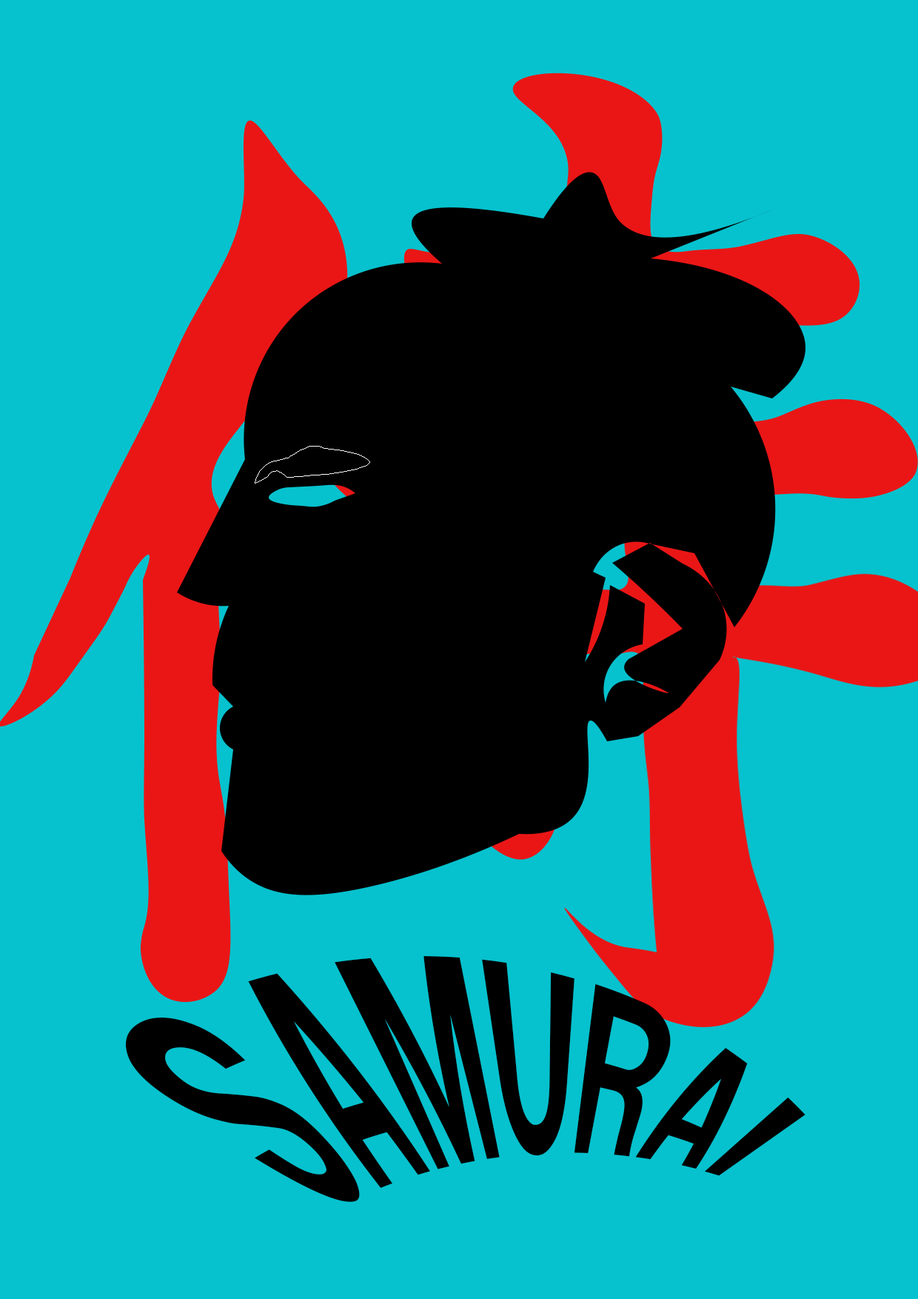
<style>
.page{position:relative;width:918px;height:1299px;background:#06c2ce}
.page>*{position:absolute;margin:0}
.t1{font:129.6px/30.9px "HGPSoeiKakugothicUB";color:#000000}
</style>
<div class="page">
<p class="t1" style="left:125px;top:956px;width:681px;height:246px">SAMURAI</p>
</div>
